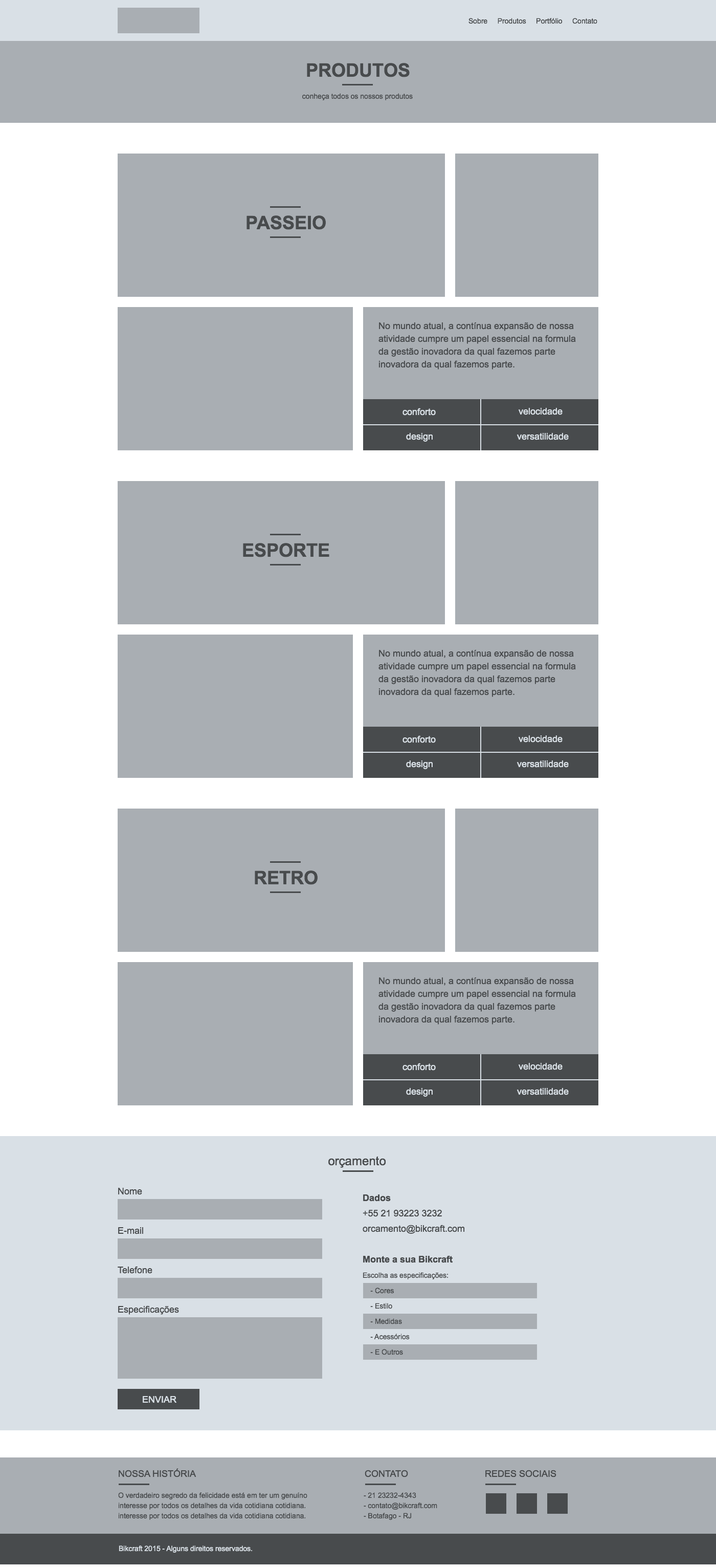
<style>
.page{position:relative;width:716px;height:1568px;background:#a9aeb3}
.page>*{position:absolute;margin:0}
.t1{font:7.2px "ArialMT";color:#484b4d}
.t2{font:18.4px "Arial-BoldMT";color:#484b4d;text-transform:uppercase}
.t3{font:9.2px/12.8px "ArialMT";color:#484b4d}
.t4{font:9.2px "ArialMT";color:#d9e0e6}
.t5{font:12.3px "ArialMT";color:#484b4d}
.t6{font:9.2px "ArialMT";color:#484b4d}
.t7{font:7.2px/15.4px "ArialMT";color:#484b4d}
.t8{font:9.2px/15.4px "Arial-BoldMT";color:#484b4d}
.t9{font:9.2px/15.4px "ArialMT";color:#484b4d}
.t10{font:9.2px "ArialMT";color:#484b4d;text-transform:uppercase}
.t11{font:7.2px/10.2px "ArialMT";color:#484b4d}
.t12{font:7.2px "ArialMT";color:#d9e0e6}
</style>
<div class="page">
<p class="t1" style="left:469px;top:18px;width:129px;height:6px">Sobre     Produtos     Portfólio     Contato</p>
<p class="t2" style="left:307px;top:63px;width:103px;height:14px">produtos</p>
<p class="t1" style="left:302px;top:93px;width:111px;height:7px">conheça todos os nossos produtos</p>
<p class="t2" style="left:247px;top:215px;width:79px;height:15px">PASSEIO</p>
<p class="t3" style="left:379px;top:322px;width:197px;height:47px">No mundo atual, a contínua expansão de nossa atividade cumpre um papel essencial na formula da gestão inovadora da qual fazemos parte inovadora da qual fazemos parte.</p>
<p class="t4" style="left:403px;top:408px;width:33px;height:8px">conforto</p>
<p class="t4" style="left:519px;top:408px;width:44px;height:7px">velocidade</p>
<p class="t4" style="left:406px;top:433px;width:27px;height:9px">design</p>
<p class="t4" style="left:517px;top:433px;width:52px;height:7px">versatilidade</p>
<p class="t2" style="left:243px;top:543px;width:87px;height:14px">esporte</p>
<p class="t3" style="left:379px;top:649px;width:197px;height:48px">No mundo atual, a contínua expansão de nossa atividade cumpre um papel essencial na formula da gestão inovadora da qual fazemos parte inovadora da qual fazemos parte.</p>
<p class="t4" style="left:403px;top:735px;width:33px;height:8px">conforto</p>
<p class="t4" style="left:519px;top:735px;width:44px;height:8px">velocidade</p>
<p class="t4" style="left:406px;top:760px;width:27px;height:9px">design</p>
<p class="t4" style="left:517px;top:760px;width:52px;height:8px">versatilidade</p>
<p class="t2" style="left:255px;top:870px;width:63px;height:15px">RETRO</p>
<p class="t3" style="left:379px;top:977px;width:197px;height:48px">No mundo atual, a contínua expansão de nossa atividade cumpre um papel essencial na formula da gestão inovadora da qual fazemos parte inovadora da qual fazemos parte.</p>
<p class="t4" style="left:403px;top:1063px;width:33px;height:8px">conforto</p>
<p class="t4" style="left:519px;top:1063px;width:44px;height:7px">velocidade</p>
<p class="t4" style="left:406px;top:1088px;width:27px;height:9px">design</p>
<p class="t4" style="left:517px;top:1088px;width:52px;height:7px">versatilidade</p>
<p class="t5" style="left:329px;top:1156px;width:57px;height:12px">orçamento</p>
<p class="t6" style="left:118px;top:1188px;width:24px;height:7px">Nome</p>
<p class="t7" style="left:363px;top:1194px;width:102px;height:161px"><span class="t8">Dados<br></span><span class="t9">+55 21 93223 3232<br>orcamento@bikcraft.com<br><br></span><span class="t8">Monte a sua Bikcraft<br></span>Escolha as especificações:<br>    - Cores<br>    - Estilo<br>    - Medidas<br>    - Acessórios<br>    - E Outros</p>
<p class="t6" style="left:118px;top:1227px;width:25px;height:7px">E-mail</p>
<p class="t6" style="left:118px;top:1266px;width:35px;height:8px">Telefone</p>
<p class="t6" style="left:118px;top:1305px;width:61px;height:10px">Especificações</p>
<p class="t4" style="left:143px;top:1396px;width:34px;height:7px">ENVIAR</p>
<p class="t10" style="left:119px;top:1468px;width:78px;height:9px">Nossa História</p>
<p class="t10" style="left:365px;top:1470px;width:43px;height:7px">Contato</p>
<p class="t10" style="left:486px;top:1470px;width:71px;height:7px">Redes sociais</p>
<p class="t11" style="left:118px;top:1492px;width:190px;height:28px">O verdadeiro segredo da felicidade está em ter um genuíno interesse por todos os detalhes da vida cotidiana cotidiana.<br>interesse por todos os detalhes da vida cotidiana cotidiana.</p>
<p class="t11" style="left:364px;top:1492px;width:74px;height:28px">- 21 23232-4343<br>- contato@bikcraft.com<br>- Botafago - RJ</p>
<p class="t12" style="left:119px;top:1545px;width:133px;height:8px">Bikcraft 2015 - Alguns direitos reservados.</p>
</div>
